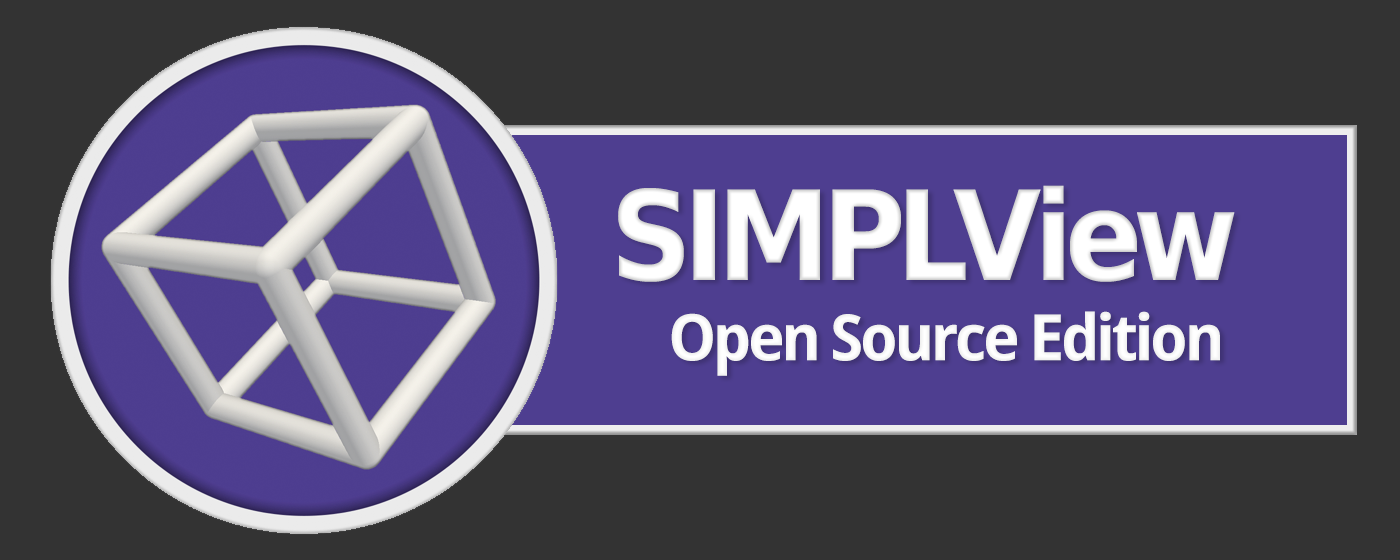
<style>
.page{position:relative;width:1400px;height:560px;background:#333333}
.page>*{position:absolute;margin:0}
.t1{font:124px "BitstreamVeraSans-Bold";letter-spacing:-0.06em;color:#ffffff;scale:0.92 1}
.t2{font:64px "DroidSans-Bold";letter-spacing:-0.06em;color:#ffffff}
</style>
<div class="page">
<p class="t1" style="left:618px;top:185px;width:617px;height:97px">SIMPLView</p>
<p class="t2" style="left:671px;top:311px;width:549px;height:65px">Open Source Edition</p>
</div>
